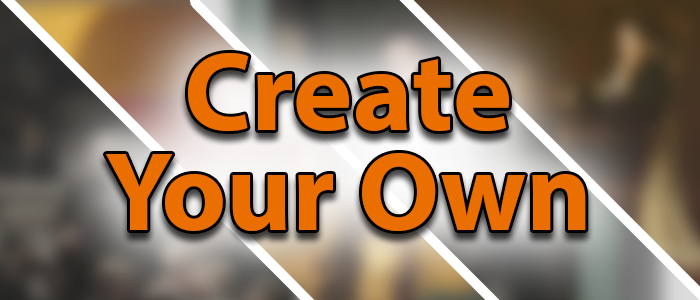
<style>
.page{position:relative;width:700px;height:300px}
.page>*{position:absolute;margin:0}
.t1{font:27.2px/100px "MyriadPro-Bold";color:#ea6e00}
</style>
<div class="page">
<p class="t1" style="left:105px;top:52px;width:481px;height:180px;text-align:center">Create<br>Your Own</p>
</div>
